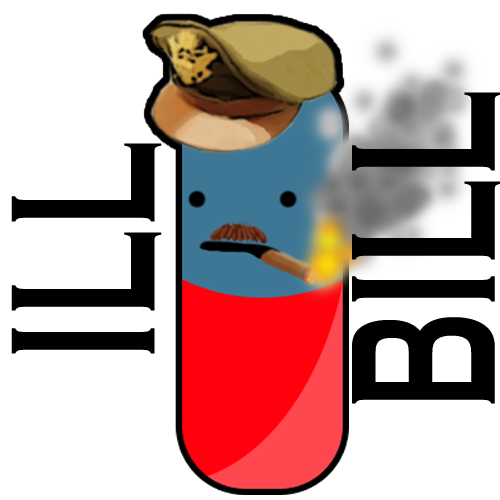
<style>
.page{position:relative;width:500px;height:500px;background:#ffffff}
.page>*{position:absolute;margin:0}
.t1{font:213.9px "CopperplateGothic-Bold";letter-spacing:0.02em;color:#000000;scale:0.57 1}
</style>
<div class="page">
<p class="t1" style="left:351px;top:92px;width:151px;height:312px;rotate:-90deg">BILL</p>
<p class="t1" style="left:11px;top:143px;width:151px;height:211px;rotate:-90deg">ILL</p>
</div>
